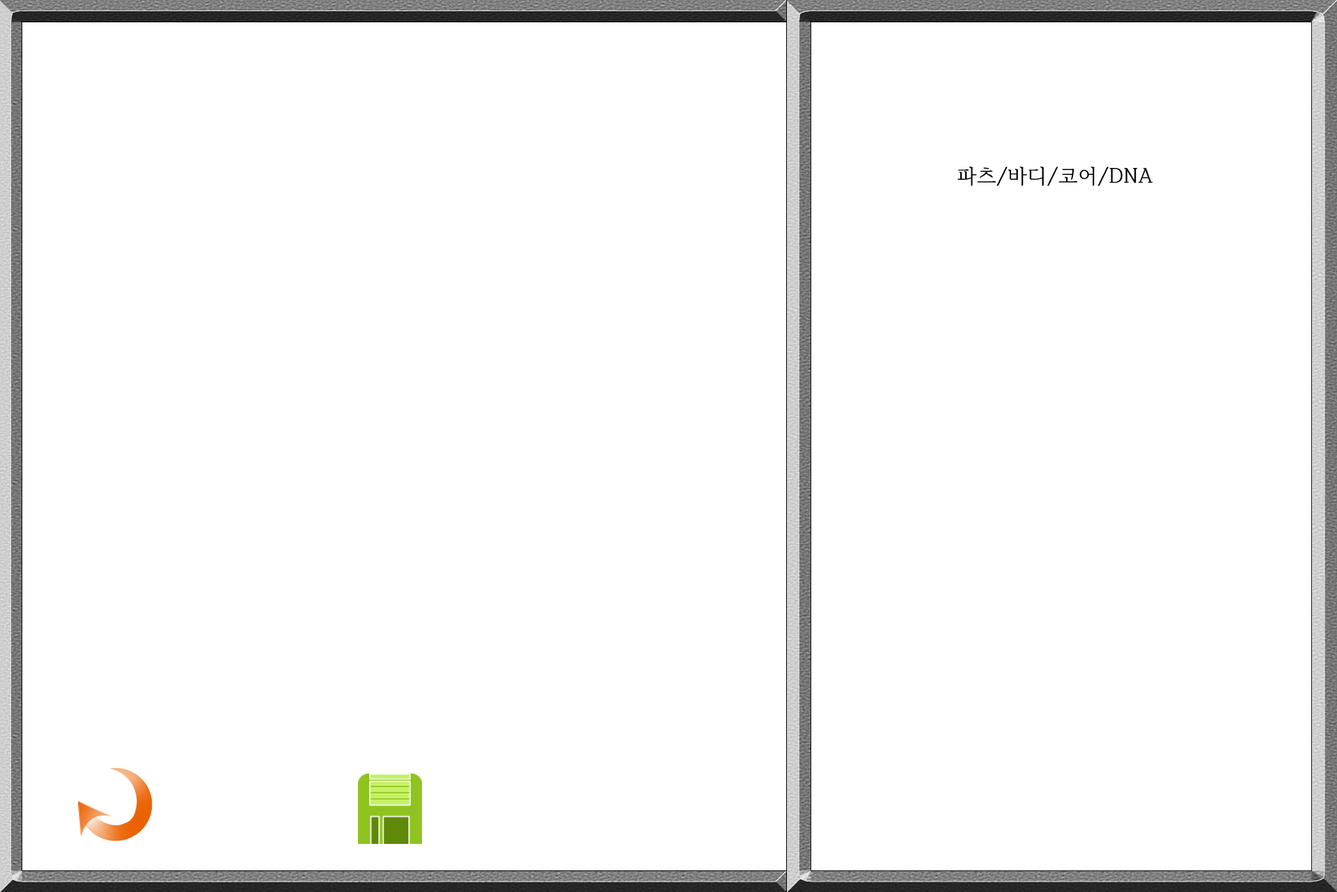
<style>
.page{position:relative;width:1337px;height:892px;background:#ffffff}
.page>*{position:absolute;margin:0}
.t1{font:20.3px "HCRBatang";color:#000000}
</style>
<div class="page">
<p class="t1" style="left:958px;top:166px;width:195px;height:20px">파츠/바디/코어/DNA</p>
</div>
